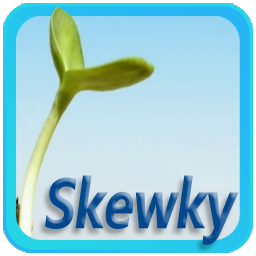
<style>
.page{position:relative;width:256px;height:256px}
.page>*{position:absolute;margin:0}
.t1{font:65.5px "MicrosoftYaHeiUI-Bold";letter-spacing:-0.05em;font-weight:bold;font-style:italic;scale:0.79 1}
</style>
<div class="page">
<p class="t1" style="left:45px;top:175px;width:193px;height:70px">Skewky</p>
</div>
